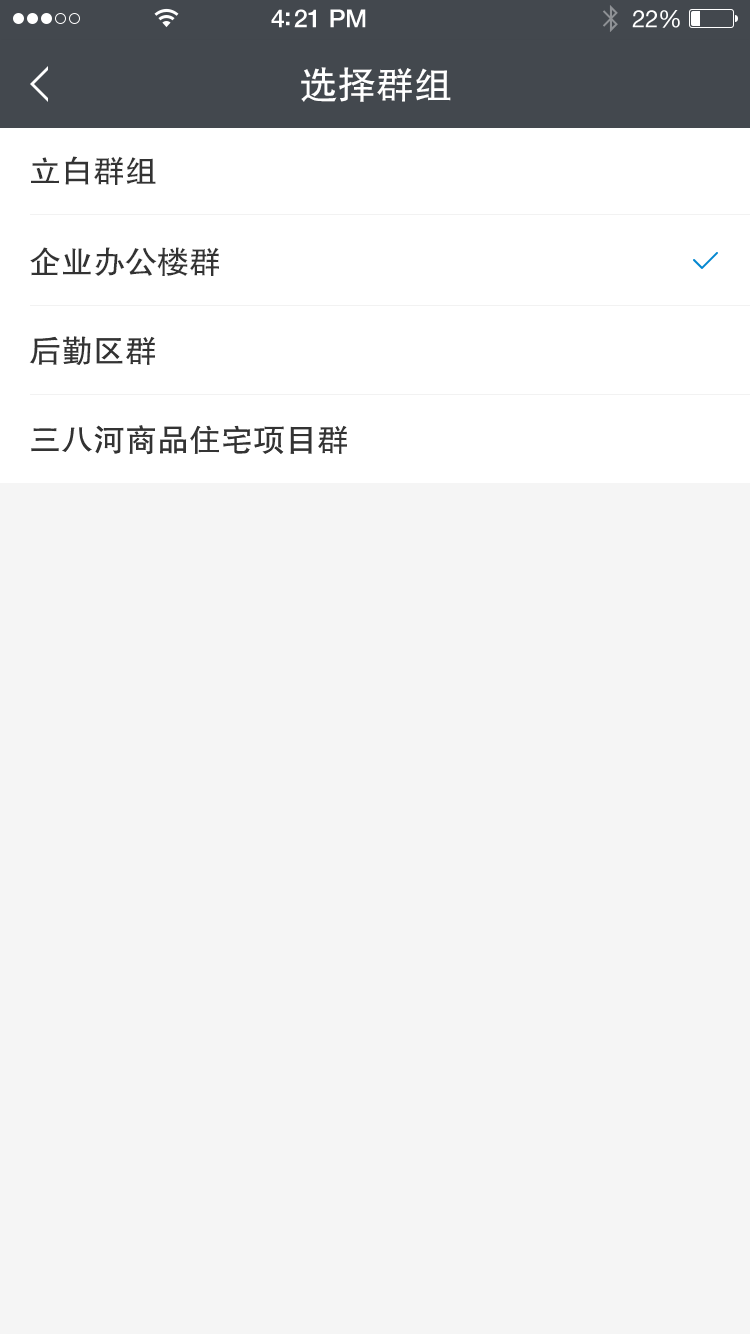
<style>
.page{position:relative;width:750px;height:1334px;background:#f5f5f5}
.page>*{position:absolute;margin:0}
.t1{font:38px "FZHTJW--GB1-0";color:#ffffff}
.t2{font:32.1px "FZHTJW--GB1-0";color:#333333}
.t3{font:32px "FZHTJW--GB1-0";color:#333333}
</style>
<div class="page">
<p class="t1" style="left:301px;top:67px;width:150px;height:35px">选择群组</p>
<p class="t2" style="left:31px;top:156px;width:125px;height:29px">立白群组</p>
<p class="t2" style="left:30px;top:247px;width:189px;height:29px">企业办公楼群</p>
<p class="t3" style="left:29px;top:336px;width:126px;height:29px">后勤区群</p>
<p class="t3" style="left:31px;top:425px;width:316px;height:30px">三八河商品住宅项目群</p>
</div>
